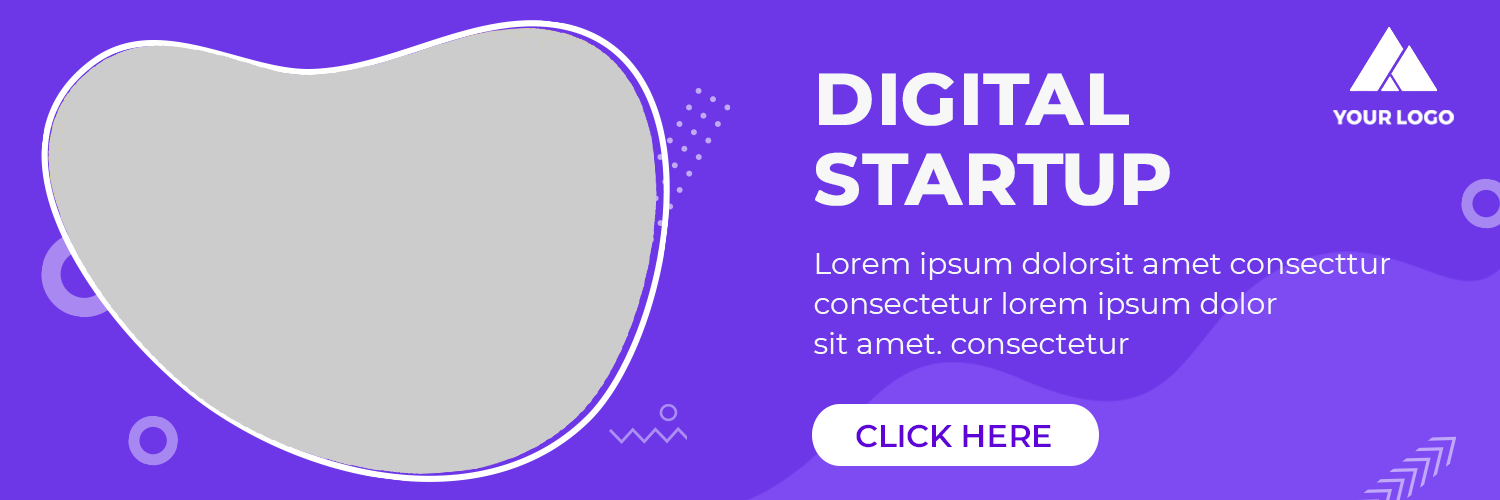
<style>
.page{position:relative;width:1500px;height:500px;background:#6d37e7}
.page>*{position:absolute;margin:0}
.t1{font:72px/80px "Montserrat-Bold";color:#f7f7f7;font-weight:bold}
.t2{font:19.9px "Montserrat-Bold";letter-spacing:0.025em;color:#ffffff}
.t3{font:30px/40px "Montserrat-Regular";color:#f7f7f7}
.t4{font:31.4px "Montserrat-SemiBold";color:#5f04d6}
</style>
<div class="page">
<p class="t1" style="left:815px;top:72px;width:355px;height:134px">DIGITAL<br>STARTUP</p>
<p class="t2" style="left:1333px;top:110px;width:121px;height:15px">YOUR LOGO</p>
<p class="t3" style="left:814px;top:252px;width:576px;height:102px;text-align:right">Lorem ipsum dolorsit amet consecttur <br>consectetur lorem ipsum dolor<br>sit amet. consectetur</p>
<p class="t4" style="left:856px;top:424px;width:195px;height:24px">CLICK HERE</p>
</div>
